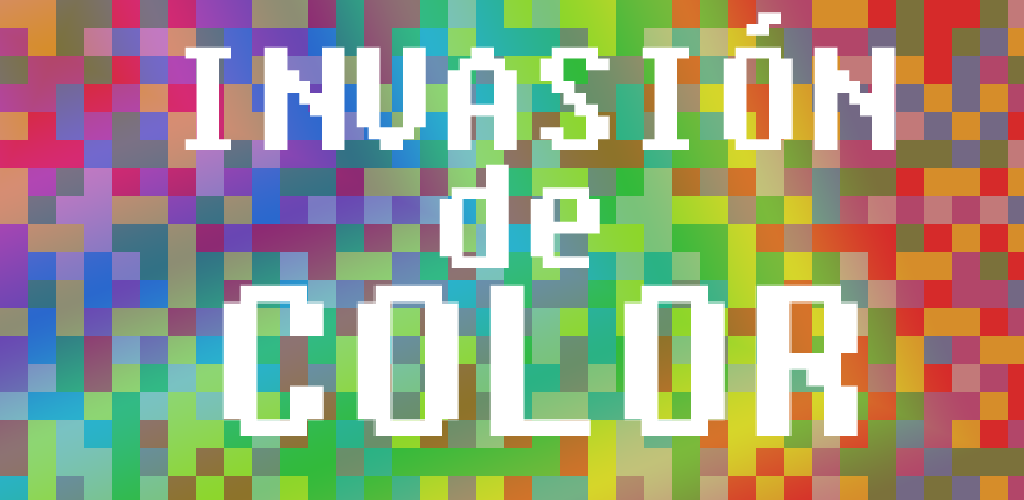
<style>
.page{position:relative;width:1024px;height:500px}
.page>*{position:absolute;margin:0}
.t1{font:146.7px "Fixedsys";color:#ffffff}
.t2{font:213.4px "Fixedsys";color:#ffffff}
</style>
<div class="page">
<p class="t1" style="left:184px;top:12px;width:712px;height:138px">INVASIÓN</p>
<p class="t1" style="left:439px;top:164px;width:161px;height:104px">de</p>
<p class="t2" style="left:222px;top:284px;width:636px;height:152px">COLOR</p>
</div>
